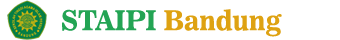
<style>
.page{position:relative;width:340px;height:40px;background:#ffffff}
.page>*{position:absolute;margin:0}
.t1{font:27.1px "News706BT-BoldC";color:#dea212}
.t2{font:27.1px "News706BT-BoldC";color:#23a454}
</style>
<div class="page">
<p class="t1" style="left:62px;top:9px;width:220px;height:28px"><span class="t2">STAIPI</span> Bandung</p>
</div>
